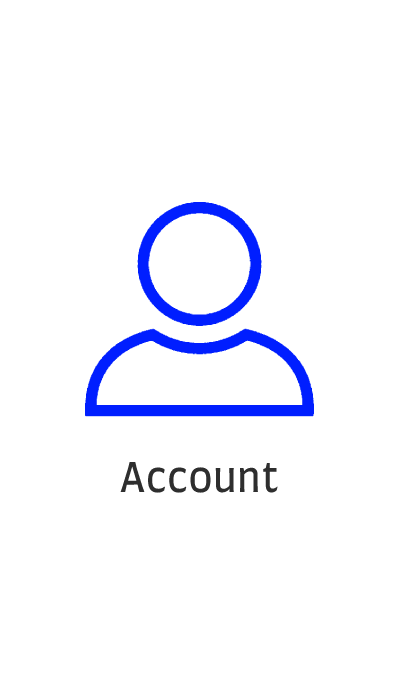
<style>
.page{position:relative;width:400px;height:700px;background:#ffffff}
.page>*{position:absolute;margin:0}
.t1{font:40px "Farro-Regular";color:#2e2e2e}
</style>
<div class="page">
<p class="t1" style="left:120px;top:462px;width:158px;height:31px">Account</p>
</div>
